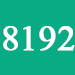
<style>
.page{position:relative;width:75px;height:75px;background:#09ab85}
.page>*{position:absolute;margin:0}
.t1{font:36px "TimesNewRomanPSMT";color:#ffffff;font-weight:bold}
</style>
<div class="page">
<p class="t1" style="left:3px;top:26px;width:72px;height:25px">8192</p>
</div>
